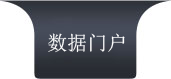
<style>
.page{position:relative;width:171px;height:79px;background:#ffffff}
.page>*{position:absolute;margin:0}
.t1{font:20px "SimSun";color:#ffffff}
</style>
<div class="page">
<p class="t1" style="left:48px;top:33px;width:77px;height:20px">数据门户</p>
</div>
